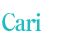
<style>
.page{position:relative;width:63px;height:43px;background:#ffffff}
.page>*{position:absolute;margin:0}
.t1{font:24px "RyuminPro-ExBold";letter-spacing:-0.08em;color:#1dbcc0;scale:0.9 1}
</style>
<div class="page">
<p class="t1" style="left:2px;top:13px;width:39px;height:18px">Cari</p>
</div>
